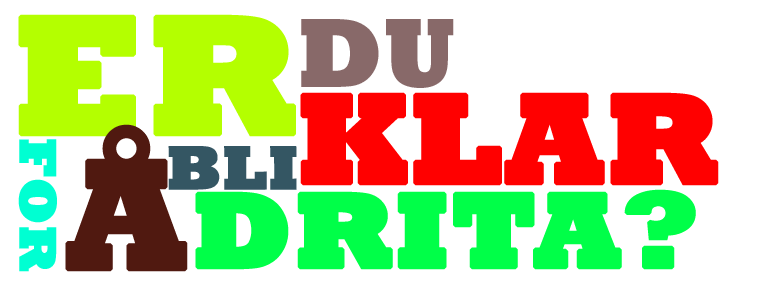
<style>
.page{position:relative;width:769px;height:288px;background:#ffffff}
.page>*{position:absolute;margin:0}
.t1{font:172.1px "Rockwell-ExtraBold";color:#b4ff00;font-weight:bold}
.t2{font:100px "Rockwell-ExtraBold";color:#886969}
.t3{font:129.6px "Rockwell-ExtraBold";color:#ff0000;font-weight:bold}
.t4{font:159.5px "Rockwell-ExtraBold";color:#501910;font-weight:bold}
.t5{font:53.5px "Rockwell-ExtraBold";color:#00ffd2;font-weight:bold}
.t6{font:63.2px "Rockwell-ExtraBold";color:#345663;font-weight:bold}
.t7{font:108.3px "Rockwell-ExtraBold";color:#00ff48;font-weight:bold;scale:1.06 1}
</style>
<div class="page">
<p class="t1" style="left:18px;top:14px;width:278px;height:123px">ER</p>
<p class="t2" style="left:301px;top:19px;width:153px;height:69px">DU</p>
<p class="t3" style="left:300px;top:92px;width:419px;height:94px">KLAR</p>
<p class="t4" style="left:65px;top:124px;width:123px;height:148px">Å</p>
<p class="t5" style="left:18px;top:139px;width:39px;height:133px;rotate:90deg">FOR</p>
<p class="t6" style="left:168px;top:146px;width:129px;height:44px">BLI</p>
<p class="t7" style="left:195px;top:189px;width:501px;height:81px">DRITA?</p>
</div>
